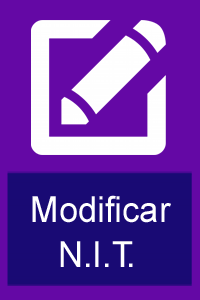
<style>
.page{position:relative;width:200px;height:300px;background:#6408a5}
.page>*{position:absolute;margin:0}
.t1{font:36px "ArialMT";color:#ffffff;scale:0.96 1}
</style>
<div class="page">
<p class="t1" style="left:32px;top:195px;width:139px;height:28px">Modificar</p>
<p class="t1" style="left:60px;top:241px;width:73px;height:26px">N.I.T.</p>
</div>
